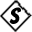
<style>
.page{position:relative;width:32px;height:32px;background:#ffffff}
.page>*{position:absolute;margin:0}
.t1{font:22.6px "Bangers-Regular";letter-spacing:0.075em;color:#010101}
</style>
<div class="page">
<p class="t1" style="left:9px;top:7px;width:12px;height:17px">s</p>
</div>
